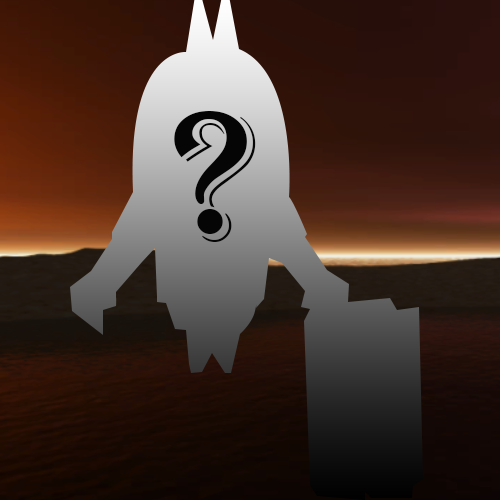
<style>
.page{position:relative;width:500px;height:500px}
.page>*{position:absolute;margin:0}
.t1{font:200px "Algerian";color:#050505}
</style>
<div class="page">
<p class="t1" style="left:174px;top:111px;width:82px;height:131px">?</p>
</div>
